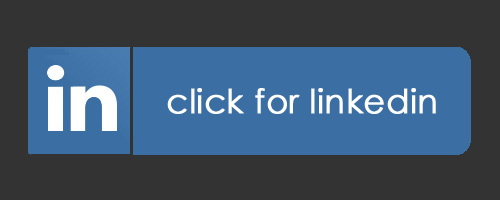
<style>
.page{position:relative;width:500px;height:200px;background:#333333}
.page>*{position:absolute;margin:0}
.t1{font:33.3px "CenturyGothic";color:#ffffff;font-weight:bold}
</style>
<div class="page">
<p class="t1" style="left:167px;top:88px;width:269px;height:26px">click for linkedin</p>
</div>
